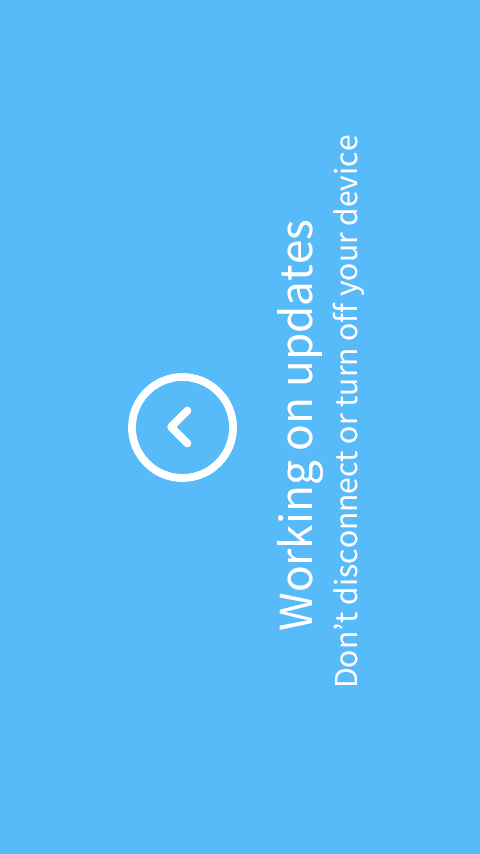
<style>
.page{position:relative;width:480px;height:854px;background:#57bbfa}
.page>*{position:absolute;margin:0}
.t1{font:30px "NotoSansCJKRegular";color:#ffffff}
.t2{font:44px "NotoSansCJKRegular";color:#ffffff}
</style>
<div class="page">
<p class="t1" style="left:332px;top:135px;width:32px;height:550px;rotate:-90deg">Don’t disconnect or turn off your device</p>
<p class="t2" style="left:277px;top:221px;width:46px;height:409px;rotate:-90deg">Working on updates</p>
</div>
